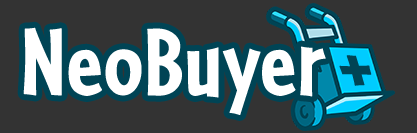
<style>
.page{position:relative;width:417px;height:133px;background:#333333}
.page>*{position:absolute;margin:0}
.t1{font:100px "Cafeteria-Bold";color:#ffffff;font-weight:bold}
.t2{font:83.3px "Cafeteria-Bold";color:#004455;font-weight:bold;scale:0.95 1}
</style>
<div class="page">
<p class="t1" style="left:23px;top:27px;width:303px;height:88px">NeoBuyer</p>
<p class="t2" style="left:339px;top:55px;width:33px;height:31px">+</p>
</div>
